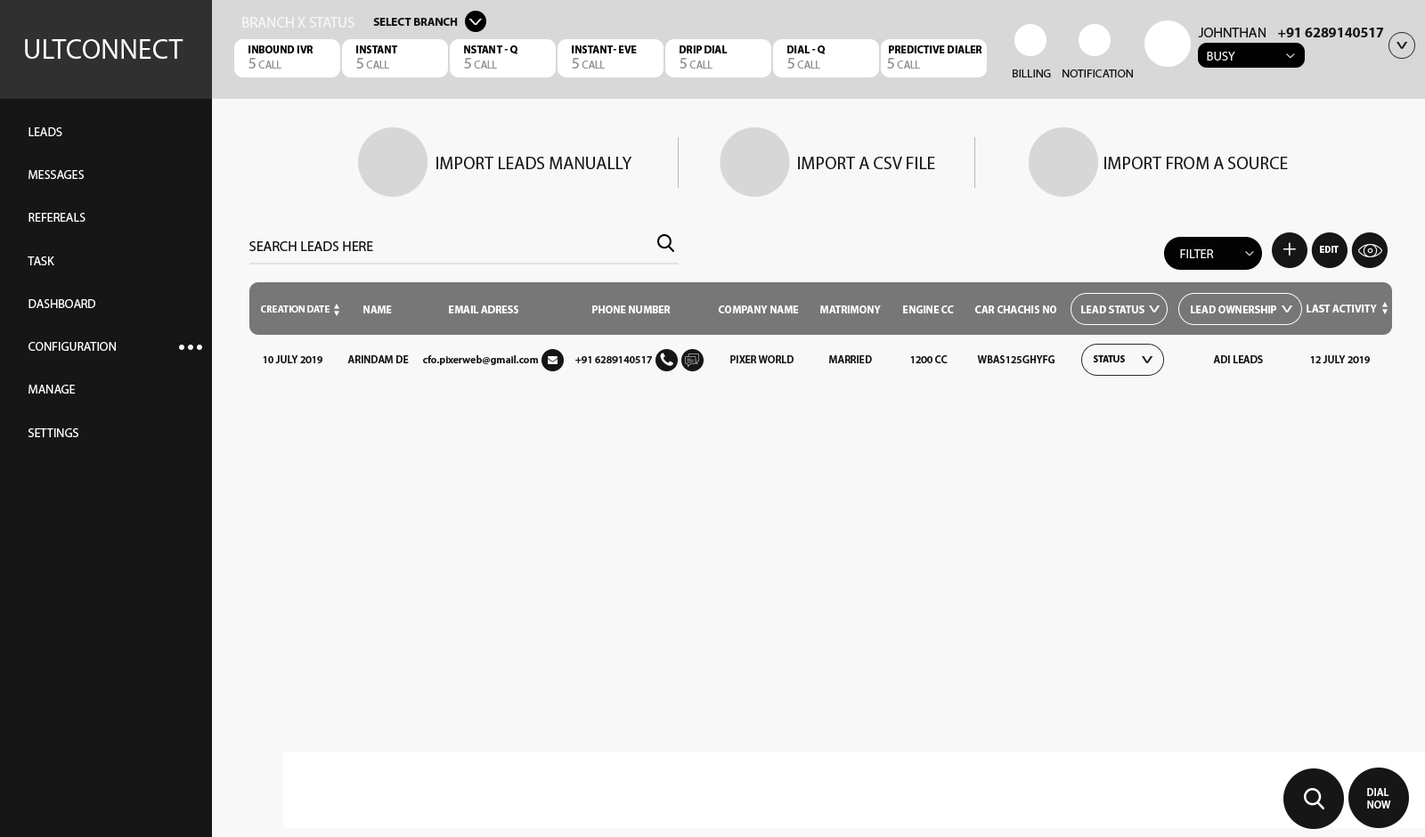
<style>
.page{position:relative;width:1425px;height:837px;background:#f8f8f8}
.page>*{position:absolute;margin:0}
.t1{font:14.7px "MyriadPro-Regular";color:#f7f7f7;text-transform:uppercase}
.t2{font:11.6px "MyriadPro-Bold";color:#161616;text-transform:uppercase}
.t3{font:24.9px "MyriadPro-Semibold";color:#ffffff;scale:0.52 1}
.t4{font:14.2px "MyriadPro-Regular";color:#161616;text-transform:uppercase}
.t5{font:14.2px "MyriadPro-Regular";color:#161616}
.t6{font:14.2px "MyriadPro-Bold";color:#161616;text-transform:uppercase}
.t7{font:28.2px "MyriadPro-Regular";color:#ffffff;text-transform:uppercase}
.t8{font:20.8px "MyriadPro-Bold";color:#161616;text-transform:uppercase;scale:0.69 1}
.t9{font:10.7px "MyriadPro-Bold";color:#000000;text-transform:uppercase}
.t10{font:12.8px "MyriadPro-Regular";color:#f1f1f1;text-transform:uppercase}
.t11{font:15.5px "MyriadPro-Regular";color:#f1f1f1;text-transform:uppercase;scale:0.51 1}
.t12{font:10.7px "MyriadPro-Regular";color:#919191;text-transform:uppercase}
.t13{font:16px "MyriadPro-Regular";color:#919191;text-transform:uppercase}
.t14{font:11.9px "MyriadPro-Regular";color:#161616;text-transform:uppercase}
.t15{font:12.5px/42.9px "MyriadPro-Regular";color:#ffffff;text-transform:uppercase}
.t16{font:17.6px "MyriadPro-Regular";color:#161616;text-transform:uppercase}
.t17{font:23.6px "MyriadPro-Regular";color:#ffffff;text-transform:uppercase}
.t18{font:9.4px "MyriadPro-Bold";color:#ffffff;text-transform:uppercase}
.t19{font:9.8px "MyriadPro-Bold";color:#ffffff;text-transform:uppercase}
.t20{font:10.7px "MyriadPro-Bold";color:#ffffff;text-transform:uppercase}
.t21{font:20.8px "MyriadPro-Bold";color:#ffffff;text-transform:uppercase;scale:0.69 1}
.t22{font:10.7px "MyriadPro-Semibold";color:#161616}
.t23{font:10.7px "MyriadPro-Semibold";color:#161616;text-transform:uppercase}
.t24{font:9.4px "MyriadPro-Bold";color:#161616;text-transform:uppercase}
.t25{font:10.7px/12.7px "MyriadPro-Semibold";color:#ffffff}
</style>
<div class="page">
<p class="t1" style="left:242px;top:17px;width:112px;height:11px">branch x status</p>
<p class="t2" style="left:373px;top:18px;width:85px;height:8px">select branch</p>
<p class="t3" style="left:468px;top:19px;width:14px;height:6px;rotate:-90deg">&lt;</p>
<p class="t4" style="left:1198px;top:28px;width:67px;height:9px">J<span class="t5">O</span>HNTHAN</p>
<p class="t6" style="left:1278px;top:28px;width:105px;height:9px">+91 6289140517</p>
<p class="t7" style="left:25px;top:39px;width:158px;height:20px">ultconnect</p>
<p class="t8" style="left:1396px;top:42px;width:12px;height:7px;rotate:90deg">&gt;</p>
<p class="t9" style="left:248px;top:45px;width:65px;height:8px">Inbound IVR</p>
<p class="t9" style="left:356px;top:45px;width:42px;height:8px">instant</p>
<p class="t9" style="left:464px;top:45px;width:53px;height:9px">nstant - Q</p>
<p class="t9" style="left:572px;top:45px;width:65px;height:8px">instant- EVE</p>
<p class="t9" style="left:679px;top:45px;width:48px;height:8px">drip dial</p>
<p class="t9" style="left:787px;top:45px;width:38px;height:9px">dial - q</p>
<p class="t9" style="left:889px;top:45px;width:93px;height:8px">predictive dialer</p>
<p class="t10" style="left:1207px;top:52px;width:28px;height:9px">busy</p>
<p class="t11" style="left:1286px;top:53px;width:9px;height:5px;rotate:90deg">&gt;</p>
<p class="t12" style="left:248px;top:58px;width:33px;height:11px"><span class="t13">5</span> Call</p>
<p class="t12" style="left:356px;top:58px;width:33px;height:11px"><span class="t13">5</span> Call</p>
<p class="t12" style="left:464px;top:58px;width:33px;height:11px"><span class="t13">5</span> Call</p>
<p class="t12" style="left:572px;top:58px;width:33px;height:11px"><span class="t13">5</span> Call</p>
<p class="t12" style="left:679px;top:58px;width:33px;height:11px"><span class="t13">5</span> Call</p>
<p class="t12" style="left:787px;top:58px;width:33px;height:11px"><span class="t13">5</span> Call</p>
<p class="t12" style="left:887px;top:58px;width:33px;height:11px"><span class="t13">5</span> Call</p>
<p class="t14" style="left:1012px;top:69px;width:39px;height:8px">billing</p>
<p class="t14" style="left:1062px;top:69px;width:71px;height:8px">notification</p>
<p class="t15" style="left:28px;top:127px;width:88px;height:310px">LEADS<br>messages<br>refereals<br>task<br>dashboard<br>configuration<br>manage<br>settings</p>
<p class="t16" style="left:436px;top:157px;width:196px;height:12px">import leads manually</p>
<p class="t16" style="left:798px;top:157px;width:137px;height:12px">import a csv file</p>
<p class="t16" style="left:1104px;top:157px;width:184px;height:12px">import from a source</p>
<p class="t4" style="left:249px;top:241px;width:124px;height:10px">SEARCH LEADS HERE</p>
<p class="t17" style="left:1283px;top:242px;width:13px;height:14px">+</p>
<p class="t18" style="left:1320px;top:246px;width:18px;height:7px">EDIT</p>
<p class="t10" style="left:1180px;top:249px;width:34px;height:9px">FILTER</p>
<p class="t11" style="left:1245px;top:251px;width:9px;height:5px;rotate:90deg">&gt;</p>
<p class="t19" style="left:261px;top:305px;width:68px;height:8px">CREATION DATE</p>
<p class="t20" style="left:363px;top:305px;width:29px;height:8px">name</p>
<p class="t20" style="left:449px;top:305px;width:70px;height:8px">email adress</p>
<p class="t20" style="left:592px;top:305px;width:78px;height:8px">phone number</p>
<p class="t20" style="left:718px;top:305px;width:81px;height:8px">company name</p>
<p class="t20" style="left:820px;top:305px;width:61px;height:8px">MATRIMONY</p>
<p class="t20" style="left:903px;top:305px;width:51px;height:8px">ENGINE CC</p>
<p class="t20" style="left:974px;top:305px;width:83px;height:8px">CAR CHACHIS NO</p>
<p class="t20" style="left:1081px;top:305px;width:63px;height:8px">lead status</p>
<p class="t21" style="left:1149px;top:305px;width:11px;height:8px;rotate:90deg">&gt;</p>
<p class="t20" style="left:1190px;top:305px;width:87px;height:8px">lead ownership</p>
<p class="t21" style="left:1281px;top:305px;width:12px;height:8px;rotate:90deg">&gt;</p>
<p class="t20" style="left:1306px;top:305px;width:71px;height:8px">LAST ACTIVITY</p>
<p class="t22" style="left:263px;top:355px;width:59px;height:8px">10 JULY 2019</p>
<p class="t23" style="left:347px;top:355px;width:62px;height:8px">Arindam De</p>
<p class="t22" style="left:423px;top:355px;width:115px;height:10px">cfo.pixerweb@gmail.com</p>
<p class="t22" style="left:575px;top:356px;width:77px;height:7px">+91 6289140517</p>
<p class="t22" style="left:730px;top:355px;width:63px;height:8px">PIXER WORLD</p>
<p class="t22" style="left:829px;top:355px;width:43px;height:8px">MARRIED</p>
<p class="t22" style="left:910px;top:355px;width:37px;height:8px">1200 CC</p>
<p class="t22" style="left:977px;top:355px;width:77px;height:8px">WBAS125GHYFG</p>
<p class="t24" style="left:1093px;top:355px;width:32px;height:7px">status</p>
<p class="t8" style="left:1142px;top:356px;width:11px;height:7px;rotate:90deg">&gt;</p>
<p class="t22" style="left:1213px;top:355px;width:50px;height:8px">ADI LEADS</p>
<p class="t22" style="left:1310px;top:355px;width:59px;height:8px">12 JULY 2019</p>
<p class="t25" style="left:1367px;top:788px;width:24px;height:20px">DIAL<br>NOW</p>
</div>
